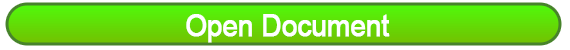
<style>
.page{position:relative;width:570px;height:50px;background:#ffffff}
.page>*{position:absolute;margin:0}
.t1{font:30.6px "ArialMT";letter-spacing:-0.025em;color:#ffffff;font-weight:bold;scale:0.91 1}
</style>
<div class="page">
<p class="t1" style="left:186px;top:14px;width:204px;height:29px">Open Document</p>
</div>
